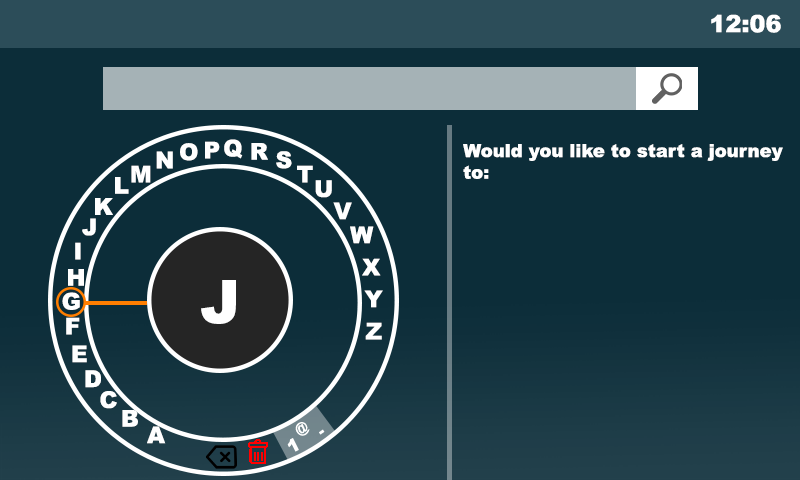
<style>
.page{position:relative;width:800px;height:480px;background:#0c2d39}
.page>*{position:absolute;margin:0}
.t1{font:24px "Arial-Black";color:#ffffff}
.t2{font:23.1px "Arial-Black";color:#ffffff}
.t3{font:18px "Arial-Black";color:#ffffff}
.t4{font:60px "Arial-Black";color:#ffffff}
</style>
<div class="page">
<p class="t1" style="left:711px;top:14px;width:70px;height:19px">12:06</p>
<p class="t2" style="left:180px;top:143px;width:18px;height:18px">O</p>
<p class="t2" style="left:205px;top:141px;width:15px;height:18px">P</p>
<p class="t2" style="left:224px;top:139px;width:19px;height:20px">Q</p>
<p class="t2" style="left:251px;top:143px;width:17px;height:17px">R</p>
<p class="t3" style="left:463px;top:144px;width:320px;height:35px">Would you like to start a journey <br>to:</p>
<p class="t2" style="left:156px;top:151px;width:17px;height:18px">N</p>
<p class="t2" style="left:276px;top:151px;width:16px;height:18px">S</p>
<p class="t2" style="left:131px;top:165px;width:20px;height:18px">M</p>
<p class="t2" style="left:297px;top:165px;width:16px;height:18px">T</p>
<p class="t2" style="left:115px;top:177px;width:14px;height:17px">L</p>
<p class="t2" style="left:315px;top:180px;width:17px;height:18px">U</p>
<p class="t2" style="left:95px;top:198px;width:18px;height:17px">K</p>
<p class="t2" style="left:333px;top:202px;width:19px;height:18px">V</p>
<p class="t2" style="left:82px;top:218px;width:14px;height:18px">J</p>
<p class="t2" style="left:350px;top:226px;width:24px;height:18px">W</p>
<p class="t2" style="left:75px;top:242px;width:6px;height:18px">I</p>
<p class="t2" style="left:68px;top:269px;width:16px;height:17px">H</p>
<p class="t2" style="left:362px;top:258px;width:19px;height:18px">X</p>
<p class="t4" style="left:201px;top:280px;width:35px;height:44px">J</p>
<p class="t2" style="left:62px;top:292px;width:18px;height:18px">G</p>
<p class="t2" style="left:364px;top:290px;width:19px;height:18px">Y</p>
<p class="t2" style="left:66px;top:317px;width:14px;height:18px">F</p>
<p class="t2" style="left:365px;top:322px;width:17px;height:18px">Z</p>
<p class="t2" style="left:72px;top:345px;width:15px;height:18px">E</p>
<p class="t2" style="left:85px;top:370px;width:16px;height:18px">D</p>
<p class="t2" style="left:100px;top:391px;width:17px;height:18px">C</p>
<p class="t2" style="left:122px;top:410px;width:16px;height:17px">B</p>
<p class="t2" style="left:147px;top:426px;width:19px;height:18px">A</p>
</div>
